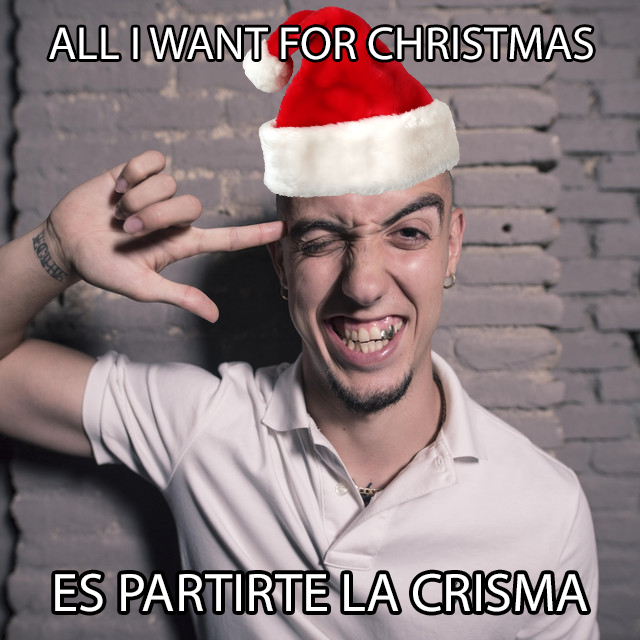
<style>
.page{position:relative;width:640px;height:640px}
.page>*{position:absolute;margin:0}
.t1{font:46.5px "MyriadPro-Regular";color:#ffffff}
.t2{font:54.6px "MyriadPro-Regular";color:#ffffff}
</style>
<div class="page">
<p class="t1" style="left:49px;top:27px;width:544px;height:33px">ALL I WANT FOR CHRISTMAS</p>
<p class="t2" style="left:55px;top:573px;width:533px;height:39px">ES PARTIRTE LA CRISMA</p>
</div>
